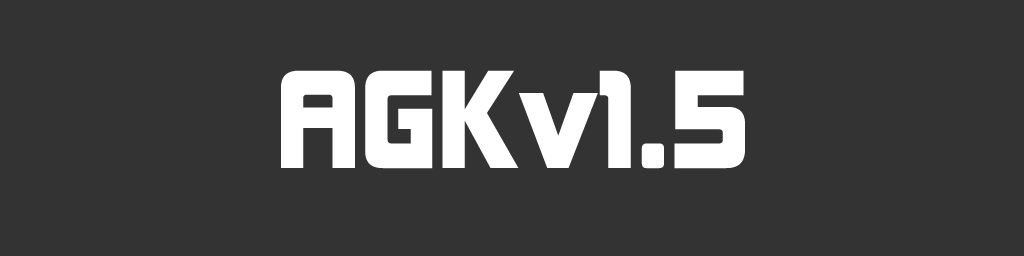
<style>
.page{position:relative;width:1024px;height:256px;background:#333333}
.page>*{position:absolute;margin:0}
.t1{font:127.9px "KimberleyBl-Regular";color:#ffffff}
</style>
<div class="page">
<p class="t1" style="left:281px;top:70px;width:464px;height:99px">AGKv1.5</p>
</div>
